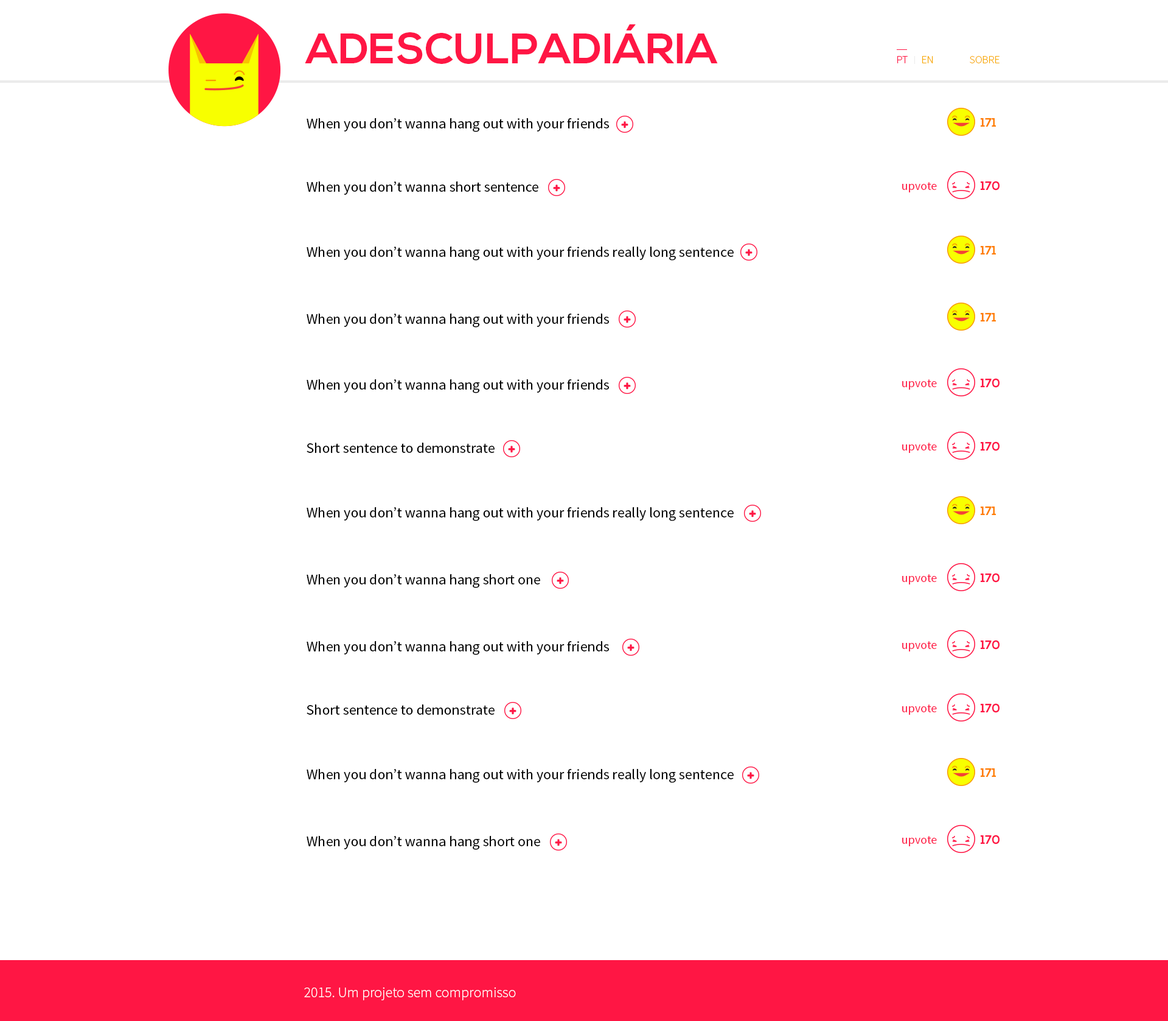
<style>
.page{position:relative;width:1168px;height:1021px;background:#ffffff}
.page>*{position:absolute;margin:0}
.t1{font:42.6px "NexaBold";color:#ff1644}
.t2{font:11px "SourceSansPro-Light";color:#ff1644}
.t3{font:11px "SourceSansPro-Light";color:#f8a900}
.t4{font:14.6px "SourceSansPro-Regular";color:#000000}
.t5{font:12.2px "NexaBold";color:#ff7e00}
.t6{font:12.2px "SourceSansPro-Regular";color:#ff1644}
.t7{font:12.2px "NexaBold";color:#ff1644}
.t8{font:14.6px "SourceSansPro-Light";color:#ffffff}
</style>
<div class="page">
<p class="t1" style="left:305px;top:24px;width:413px;height:41px">ADESCULPADIÁRIA</p>
<p class="t2" style="left:898px;top:56px;width:10px;height:7px">PT</p>
<p class="t3" style="left:923px;top:56px;width:11px;height:7px">EN</p>
<p class="t3" style="left:970px;top:56px;width:30px;height:7px">SOBRE</p>
<p class="t4" style="left:307px;top:118px;width:303px;height:14px">When you don’t wanna hang out with your friends</p>
<p class="t5" style="left:981px;top:118px;width:15px;height:9px">171</p>
<p class="t4" style="left:307px;top:181px;width:232px;height:14px">When you don’t wanna short sentence</p>
<p class="t6" style="left:902px;top:182px;width:35px;height:10px">upvote</p>
<p class="t7" style="left:981px;top:181px;width:19px;height:9px">170</p>
<p class="t5" style="left:981px;top:246px;width:15px;height:8px">171</p>
<p class="t4" style="left:307px;top:246px;width:427px;height:14px">When you don’t wanna hang out with your friends really long sentence</p>
<p class="t4" style="left:307px;top:313px;width:303px;height:14px">When you don’t wanna hang out with your friends</p>
<p class="t5" style="left:981px;top:313px;width:15px;height:8px">171</p>
<p class="t7" style="left:981px;top:378px;width:19px;height:10px">170</p>
<p class="t4" style="left:307px;top:379px;width:303px;height:14px">When you don’t wanna hang out with your friends</p>
<p class="t6" style="left:902px;top:379px;width:35px;height:10px">upvote</p>
<p class="t4" style="left:307px;top:442px;width:188px;height:11px">Short sentence to demonstrate</p>
<p class="t6" style="left:902px;top:442px;width:35px;height:11px">upvote</p>
<p class="t7" style="left:981px;top:441px;width:19px;height:10px">170</p>
<p class="t4" style="left:307px;top:507px;width:427px;height:14px">When you don’t wanna hang out with your friends really long sentence</p>
<p class="t5" style="left:981px;top:506px;width:15px;height:9px">171</p>
<p class="t4" style="left:307px;top:574px;width:233px;height:14px">When you don’t wanna hang short one</p>
<p class="t6" style="left:902px;top:574px;width:35px;height:10px">upvote</p>
<p class="t7" style="left:981px;top:573px;width:19px;height:9px">170</p>
<p class="t4" style="left:307px;top:641px;width:303px;height:14px">When you don’t wanna hang out with your friends</p>
<p class="t6" style="left:902px;top:641px;width:35px;height:10px">upvote</p>
<p class="t7" style="left:981px;top:640px;width:19px;height:9px">170</p>
<p class="t4" style="left:307px;top:704px;width:188px;height:10px">Short sentence to demonstrate</p>
<p class="t6" style="left:902px;top:704px;width:35px;height:10px">upvote</p>
<p class="t7" style="left:981px;top:703px;width:19px;height:10px">170</p>
<p class="t4" style="left:307px;top:769px;width:427px;height:14px">When you don’t wanna hang out with your friends really long sentence</p>
<p class="t5" style="left:981px;top:768px;width:15px;height:9px">171</p>
<p class="t4" style="left:307px;top:836px;width:233px;height:14px">When you don’t wanna hang short one</p>
<p class="t6" style="left:902px;top:836px;width:35px;height:10px">upvote</p>
<p class="t7" style="left:981px;top:834px;width:19px;height:10px">170</p>
<p class="t8" style="left:304px;top:986px;width:212px;height:14px">2015. Um projeto sem compromisso</p>
</div>
